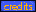
<style>
.page{position:relative;width:36px;height:12px;background:#3f59ef}
.page>*{position:absolute;margin:0}
.t1{font:9.9px "MicrosoftYaHei";color:#ffae00;scale:0.91 1}
</style>
<div class="page">
<p class="t1" style="left:4px;top:2px;width:28px;height:8px">credits</p>
</div>
